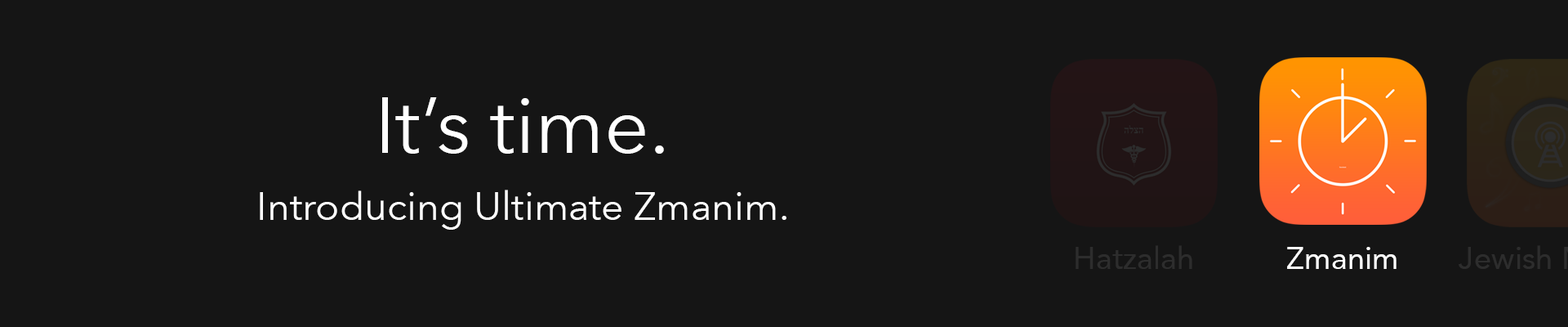
<style>
.page{position:relative;width:1568px;height:327px;background:#151515}
.page>*{position:absolute;margin:0}
.t1{font:78.4px "AvenirNext-Regular";color:#ffffff}
.t2{font:39.2px "AvenirNext-Regular";color:#ffffff}
.t3{font:31.4px "Avenir-Roman";color:#2d2d2d}
.t4{font:31.4px "Avenir-Roman";color:#ffffff}
</style>
<div class="page">
<p class="t1" style="left:382px;top:97px;width:282px;height:57px">It’s time.</p>
<p class="t2" style="left:260px;top:189px;width:526px;height:40px">Introducing Ultimate Zmanim.</p>
<p class="t3" style="left:1076px;top:245px;width:116px;height:24px">Hatzalah</p>
<p class="t4" style="left:1287px;top:247px;width:109px;height:22px">Zmanim</p>
</div>
